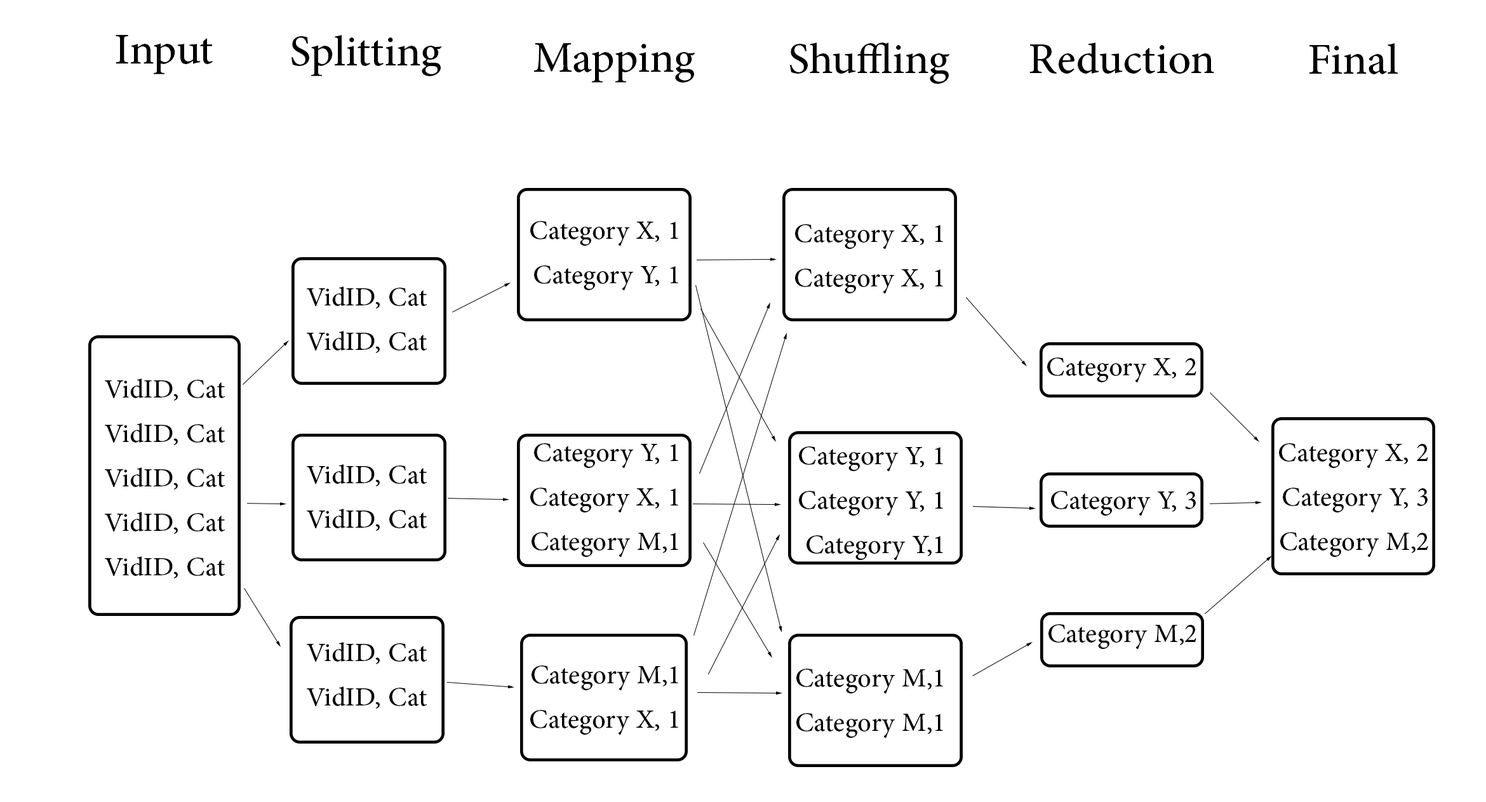
<style>
.page{position:relative;width:1486px;height:802px;background:#ffffff}
.page>*{position:absolute;margin:0}
.t1{font:60.9px "AdobeArabic-Regular";color:#000000}
.t2{font:37.1px "AdobeArabic-Regular";color:#000000}
</style>
<div class="page">
<p class="t1" style="left:116px;top:35px;width:97px;height:39px">Input</p>
<p class="t1" style="left:292px;top:35px;width:150px;height:41px">Splitting</p>
<p class="t1" style="left:534px;top:43px;width:162px;height:40px">Mapping</p>
<p class="t1" style="left:790px;top:43px;width:160px;height:41px">Shuffling</p>
<p class="t1" style="left:1030px;top:43px;width:184px;height:31px">Reduction</p>
<p class="t1" style="left:1309px;top:43px;width:90px;height:31px">Final</p>
<p class="t2" style="left:530px;top:221px;width:148px;height:514px">Category X, 1<br>Category Y, 1<br><br><br><br>Category Y, 1<br>Category X, 1<br>Category M,1<br><br><br>Category M,1<br>Category X, 1</p>
<p class="t2" style="left:795px;top:224px;width:148px;height:514px">Category X, 1<br>Category X, 1<br><br><br><br>Category Y, 1<br>Category Y, 1<br>Category Y,1<br><br><br>Category M,1<br>Category M,1</p>
<p class="t2" style="left:307px;top:286px;width:120px;height:423px">VidID, Cat<br>VidID, Cat<br><br><br>VidID, Cat<br>VidID, Cat<br><br><br>VidID, Cat<br>VidID, Cat</p>
<p class="t2" style="left:1047px;top:358px;width:150px;height:291px">Category X, 2<br><br><br>Category Y, 3<br><br><br>Category M,2</p>
<p class="t2" style="left:105px;top:379px;width:120px;height:200px">VidID, Cat<br>VidID, Cat<br>VidID, Cat<br>VidID, Cat<br>VidID, Cat</p>
<p class="t2" style="left:1279px;top:443px;width:150px;height:114px">Category X, 2<br>Category Y, 3<br>Category M,2</p>
</div>
